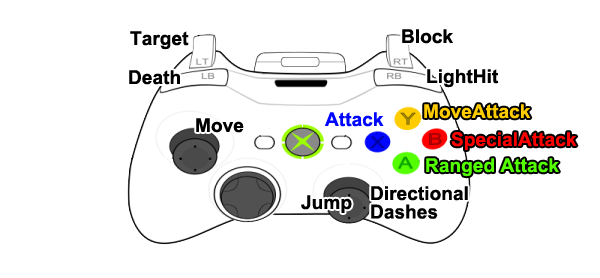
<style>
.page{position:relative;width:600px;height:278px;background:#ffffff}
.page>*{position:absolute;margin:0}
.t1{font:19.1px "Arial-BoldMT";color:#000000}
.t2{font:19.1px "Arial-BoldMT";color:#0006ff}
.t3{font:19.1px "Arial-BoldMT";color:#ffcc00}
.t4{font:19.1px "Arial-BoldMT";color:#ff0000}
.t5{font:19.1px "Arial-BoldMT";color:#54ff00}
.t6{font:19.1px/18.4px "Arial-BoldMT";color:#000000}
</style>
<div class="page">
<p class="t1" style="left:402px;top:29px;width:51px;height:15px">Block</p>
<p class="t1" style="left:130px;top:31px;width:59px;height:19px">Target</p>
<p class="t1" style="left:129px;top:70px;width:51px;height:15px">Death</p>
<p class="t1" style="left:427px;top:69px;width:72px;height:19px">LightHit</p>
<p class="t2" style="left:325px;top:112px;width:59px;height:15px">Attack</p>
<p class="t3" style="left:424px;top:104px;width:107px;height:15px">MoveAttack</p>
<p class="t1" style="left:196px;top:118px;width:48px;height:15px">Move</p>
<p class="t4" style="left:451px;top:132px;width:126px;height:18px">SpecialAttack</p>
<p class="t5" style="left:426px;top:158px;width:133px;height:19px">Ranged Attack</p>
<p class="t1" style="left:301px;top:195px;width:51px;height:18px">Jump</p>
<p class="t6" style="left:371px;top:186px;width:97px;height:33px">Directional<br>Dashes</p>
</div>
